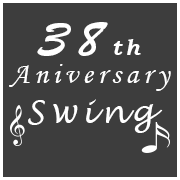
<style>
.page{position:relative;width:180px;height:180px;background:#3d3d3d}
.page>*{position:absolute;margin:0}
.t1{font:30px/36px "MonotypeCorsiva";letter-spacing:0.16em;color:#ffffff}
.t2{font:50px/45px "BrushScriptStd";letter-spacing:0.16em;color:#ffffff}
.t3{font:22px/45px "BookmanOldStyle-BoldItalic";letter-spacing:0.16em;color:#ffffff}
.t4{font:32px/36px "LucidaHandwriting-Italic";letter-spacing:0.16em;color:#ffffff}
</style>
<div class="page">
<p class="t1" style="left:9px;top:22px;width:162px;height:111px;text-align:center"><span class="t2">38</span><span class="t3">th<br></span>Aniversary<br><span class="t4">Swing</span></p>
</div>
